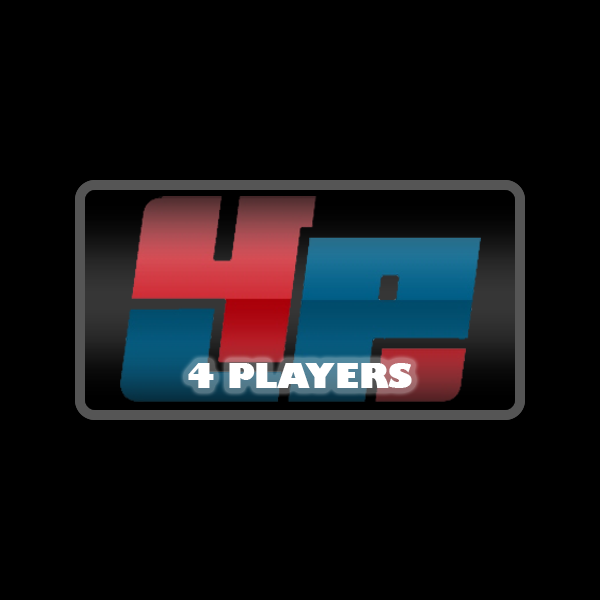
<style>
.page{position:relative;width:600px;height:600px;background:#000000}
.page>*{position:absolute;margin:0}
.t1{font:33px "GillSans-UltraBold";color:#ffffff}
</style>
<div class="page">
<p class="t1" style="left:188px;top:363px;width:224px;height:25px">4 PLAYERS</p>
</div>
